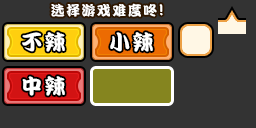
<style>
.page{position:relative;width:256px;height:128px;background:#333333}
.page>*{position:absolute;margin:0}
.t1{font:14px "DFPKanTingLiuW9";letter-spacing:0.1em;color:#ffffff}
.t2{font:16px "DFPKanTingLiuW9";letter-spacing:0.1em;color:#ffffff}
.t3{font:21px "DFPKanTingLiuW9";letter-spacing:0.1em;color:#ffffff}
</style>
<div class="page">
<p class="t1" style="left:51px;top:3px;width:112px;height:14px">选择游戏难度咚<span class="t2">!</span></p>
<p class="t3" style="left:22px;top:32px;width:43px;height:20px">不辣</p>
<p class="t3" style="left:110px;top:32px;width:43px;height:20px">小辣</p>
<p class="t3" style="left:22px;top:76px;width:43px;height:20px">中辣</p>
</div>
